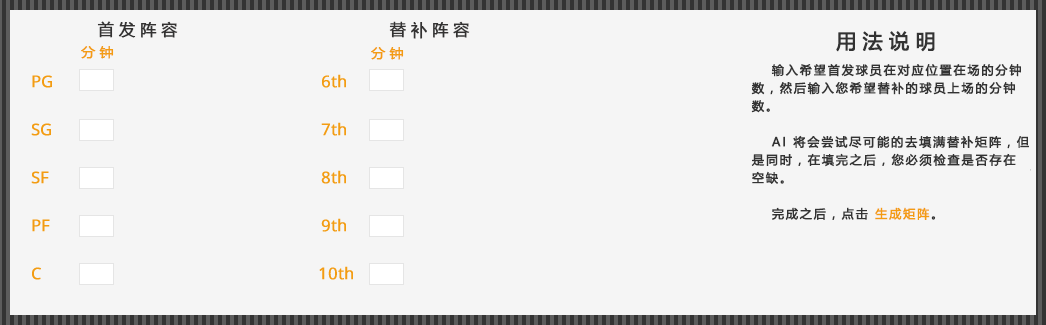
<style>
.page{position:relative;width:1046px;height:325px;background:#f5f5f5}
.page>*{position:absolute;margin:0}
.t1{font:16px "MicrosoftYaHei";letter-spacing:0.3em;color:#333232;font-weight:bold}
.t2{font:20px "MicrosoftYaHei";letter-spacing:0.3em;color:#333333;font-weight:bold}
.t3{font:14px "MicrosoftYaHei";letter-spacing:0.3em;color:#f39c12;font-weight:bold}
.t4{font:12px/18px "MicrosoftYaHei";letter-spacing:0.14em;color:#333333;font-weight:bold}
.t5{font:12px/18px "MicrosoftYaHei";letter-spacing:0.14em;color:#f39c12;font-weight:bold}
</style>
<div class="page">
<p class="t1" style="left:97px;top:21px;width:81px;height:17px">首发阵容</p>
<p class="t1" style="left:389px;top:21px;width:81px;height:18px">替补阵容</p>
<p class="t2" style="left:836px;top:31px;width:99px;height:21px">用法说明</p>
<p class="t3" style="left:81px;top:46px;width:33px;height:13px">分钟</p>
<p class="t3" style="left:371px;top:47px;width:33px;height:13px">分钟</p>
<p class="t4" style="left:751px;top:64px;width:278px;height:156px">输入希望首发球员在对应位置在场的分钟数，然后输入您希望替补的球员上场的分钟数。<br><br>AI 将会尝试尽可能的去填满替补矩阵，但是同时，在填完之后，您必须检查是否存在空缺。<br><br>完成之后，点击 <span class="t5">生成矩阵</span>。</p>
</div>
